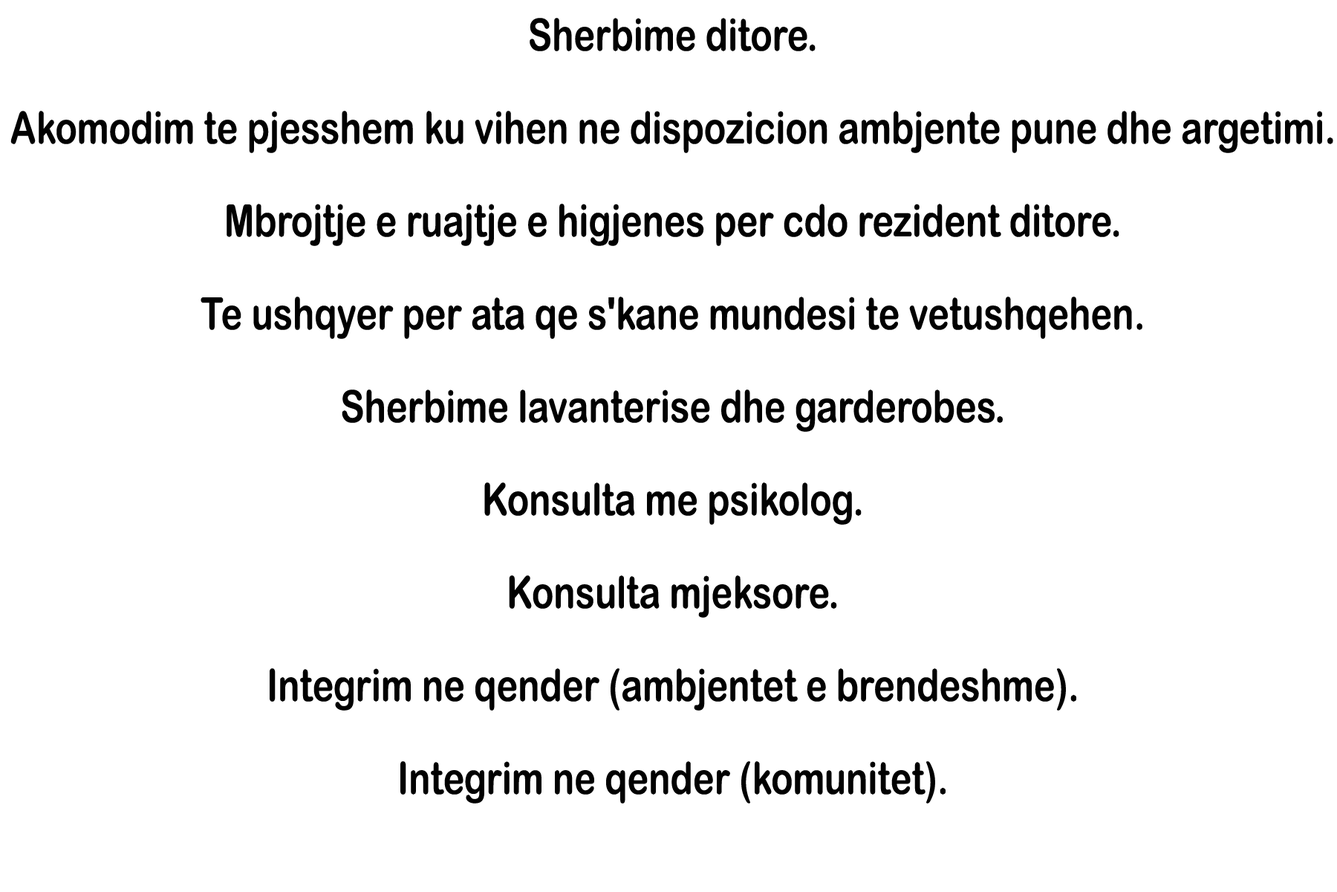
<style>
.page{position:relative;width:1337px;height:892px;background:#ffffff}
.page>*{position:absolute;margin:0}
.t1{font:44.6px/92.9px "ArialRoundedMTBold";color:#010101;scale:0.81 1}
</style>
<div class="page">
<p class="t1" style="left:10px;top:18px;width:1324px;height:785px;text-align:center">Sherbime ditore.<br>Akomodim te pjesshem ku vihen ne dispozicion ambjente pune dhe argetimi.<br>Mbrojtje e ruajtje e higjenes per cdo rezident ditore.<br>Te ushqyer per ata qe s'kane mundesi te vetushqehen.<br>Sherbime lavanterise dhe garderobes.<br>Konsulta me psikolog.<br>Konsulta mjeksore.<br>Integrim ne qender (ambjentet e brendeshme).<br>Integrim ne qender (komunitet).</p>
</div>
